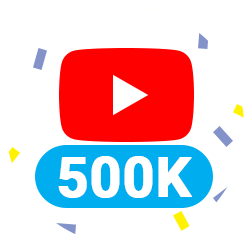
<style>
.page{position:relative;width:250px;height:250px;background:#ffffff}
.page>*{position:absolute;margin:0}
.t1{font:55.2px "Roboto-Bold";color:#ffffff;font-weight:bold}
</style>
<div class="page">
<p class="t1" style="left:58px;top:156px;width:134px;height:42px">500K</p>
</div>
